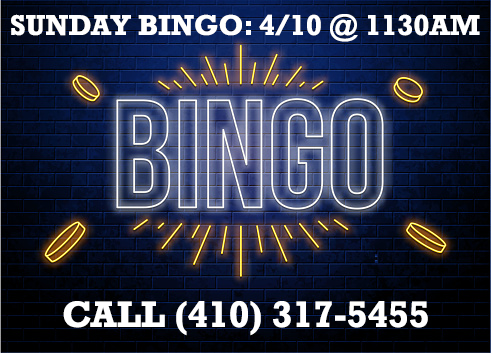
<style>
.page{position:relative;width:491px;height:353px}
.page>*{position:absolute;margin:0}
.t1{font:29.2px "Rockwell-Bold";color:#ffffff}
.t2{font:37.5px "Rockwell-Bold";color:#ffffff}
</style>
<div class="page">
<p class="t1" style="left:11px;top:14px;width:469px;height:28px">SUNDAY BINGO: 4/10 @ 1130AM</p>
<p class="t2" style="left:63px;top:301px;width:365px;height:35px">CALL (410) 317-5455</p>
</div>
